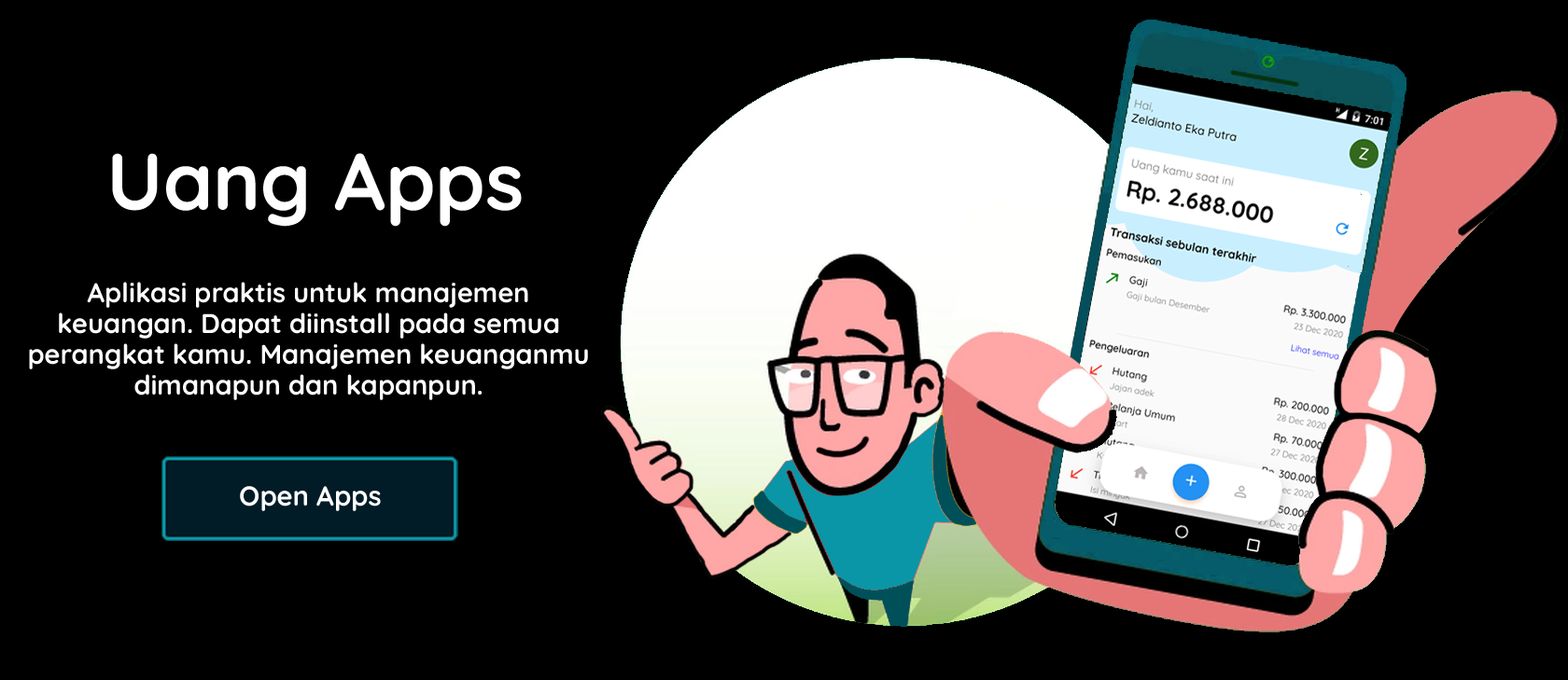
<style>
.page{position:relative;width:1568px;height:680px;background:#000000}
.page>*{position:absolute;margin:0}
.t1{font:80.3px "Quicksand-Bold";color:#ffffff}
.t2{font:27.1px/30.8px "Quicksand-Bold";color:#ffffff}
.t3{font:27.4px "Quicksand-Bold";color:#ffffff}
</style>
<div class="page">
<p class="t1" style="left:112px;top:153px;width:410px;height:74px">Uang Apps</p>
<p class="t2" style="left:29px;top:282px;width:559px;height:118px;text-align:center">Aplikasi praktis untuk manajemen <br>keuangan. Dapat diinstall pada semua perangkat kamu. Manajemen keuanganmu dimanapun dan kapanpun.</p>
<p class="t3" style="left:240px;top:486px;width:141px;height:25px">Open Apps</p>
</div>
